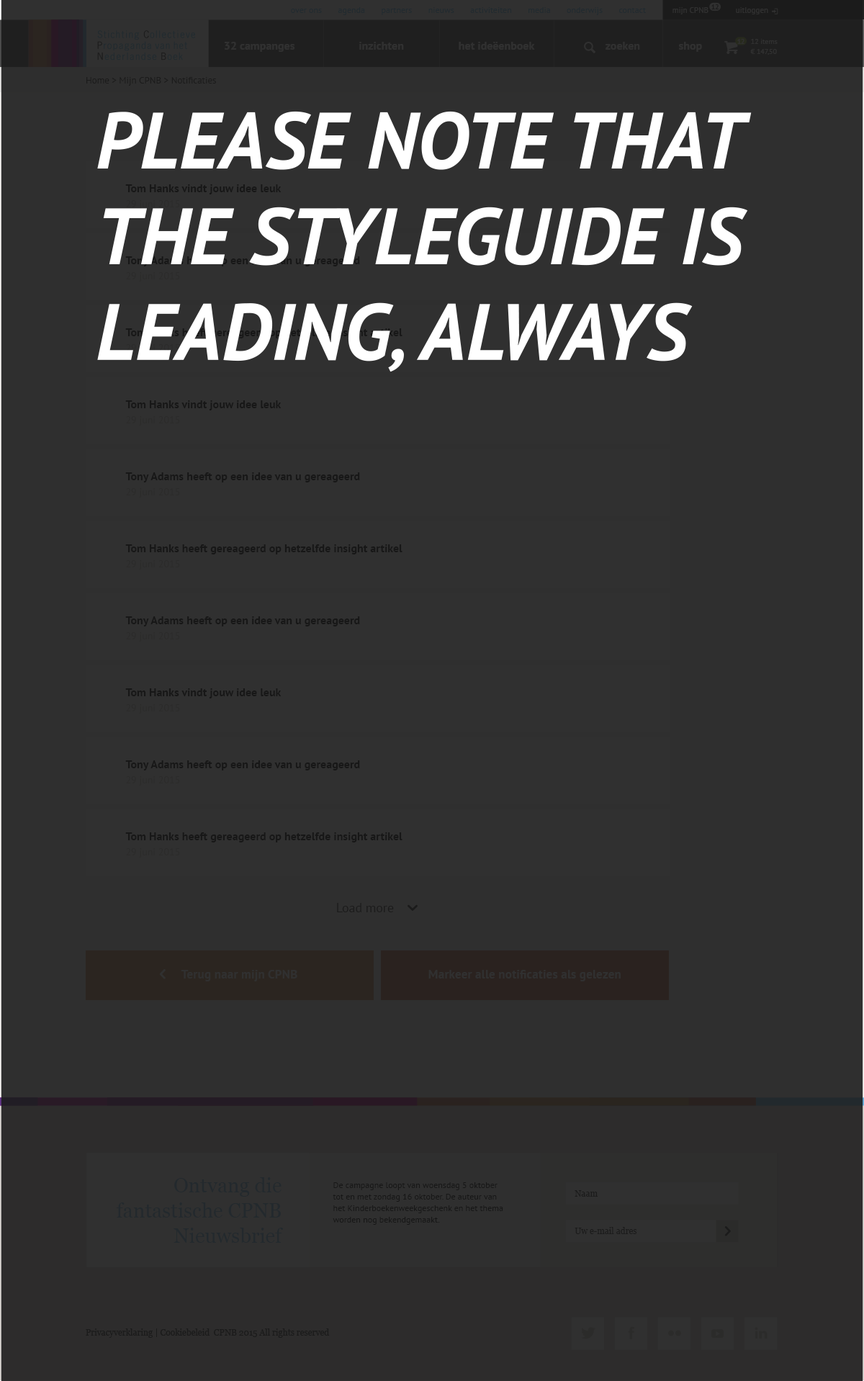
<style>
.page{position:relative;width:864px;height:1381px;background:#303030}
.page>*{position:absolute;margin:0}
.t1{font:7.2px "PTSans-Bold";letter-spacing:-0.05em;color:#222221}
.t2{font:8.6px "PTSans-Regular";color:#212a2f}
.t3{font:8px "PTSans-Regular";color:#303030}
.t4{font:11.5px "PTSans-Bold";color:#303030}
.t5{font:7.2px "PTSans-Bold";letter-spacing:-0.05em;color:#303030}
.t6{font:7.2px/10.1px "PTSans-Regular";color:#303030}
.t7{font:9.4px "PTSans-Regular";color:#222221}
.t8{font:11.5px/15.1px "PTSans-Bold";color:#000000}
.t9{font:10.1px/15.1px "PTSans-Regular";color:#cac5c1}
.t10{font:12.9px "PTSans-Regular";color:#222222}
.t11{font:12.6px "PTSans-Bold";color:#303030}
.t12{font:20.2px/25.2px "Georgia";color:#23292d}
.t13{font:8.6px/11.5px "PTSans-Regular";color:#000000}
.t14{font:8.6px "Georgia";color:#222221}
</style>
<div class="page">
<p class="t1" style="left:711px;top:4px;width:7px;height:5px">12</p>
<p class="t2" style="left:291px;top:7px;width:355px;height:8px">over ons       agenda       partners       nieuws       activiteiten       media       onderwijs       contact</p>
<p class="t3" style="left:672px;top:7px;width:36px;height:7px">mijn CPNB</p>
<p class="t3" style="left:736px;top:7px;width:32px;height:7px">uitloggen</p>
<p class="t4" style="left:225px;top:42px;width:70px;height:10px">32 campanges</p>
<p class="t4" style="left:359px;top:42px;width:45px;height:8px">inzichten</p>
<p class="t4" style="left:459px;top:42px;width:76px;height:8px">het ideëenboek</p>
<p class="t4" style="left:605px;top:42px;width:35px;height:8px">zoeken</p>
<p class="t4" style="left:678px;top:42px;width:24px;height:10px">shop</p>
<p class="t5" style="left:737px;top:39px;width:7px;height:5px">12</p>
<p class="t6" style="left:750px;top:39px;width:27px;height:16px">12 items<br>€ 147,50</p>
<p class="t7" style="left:86px;top:77px;width:130px;height:9px">Home &gt; Mijn CPNB &gt; Notificaties</p>
<p class="t8" style="left:125px;top:400px;width:156px;height:25px">Tom Hanks vindt jouw idee leuk<br><span class="t9">29 juni 2015</span></p>
<p class="t8" style="left:125px;top:472px;width:235px;height:25px">Tony Adams heeft op een idee van u gereageerd<br><span class="t9">29 juni 2015</span></p>
<p class="t8" style="left:125px;top:544px;width:277px;height:25px">Tom Hanks heeft gereageerd op hetzelfde insight artikel<br><span class="t9">29 juni 2015</span></p>
<p class="t8" style="left:125px;top:616px;width:235px;height:25px">Tony Adams heeft op een idee van u gereageerd<br><span class="t9">29 juni 2015</span></p>
<p class="t8" style="left:125px;top:688px;width:156px;height:25px">Tom Hanks vindt jouw idee leuk<br><span class="t9">29 juni 2015</span></p>
<p class="t8" style="left:125px;top:760px;width:235px;height:25px">Tony Adams heeft op een idee van u gereageerd<br><span class="t9">29 juni 2015</span></p>
<p class="t8" style="left:125px;top:832px;width:277px;height:25px">Tom Hanks heeft gereageerd op hetzelfde insight artikel<br><span class="t9">29 juni 2015</span></p>
<p class="t10" style="left:337px;top:903px;width:57px;height:9px">Load more</p>
<p class="t11" style="left:181px;top:970px;width:116px;height:11px">Terug naar mijn CPNB</p>
<p class="t11" style="left:428px;top:970px;width:192px;height:11px">Markeer alle notificaties als gelezen</p>
<p class="t12" style="left:116px;top:1177px;width:167px;height:65px;text-align:right">Ontvang die<br>fantastische CPNB<br>Nieuwsbrief</p>
<p class="t13" style="left:333px;top:1182px;width:170px;height:42px">De campagne loopt van woensdag 5 oktober tot en met zondag 16 oktober. De auteur van het Kinderboekenweekgeschenk en het thema worden nog bekendgemaakt.</p>
<p class="t14" style="left:574px;top:1190px;width:23px;height:6px">Naam</p>
<p class="t14" style="left:574px;top:1227px;width:63px;height:7px">Uw e-mail adres</p>
<p class="t14" style="left:86px;top:1328px;width:244px;height:9px">Privacyverklaring | Cookiebeleid  CPNB 2015 All rights reserved</p>
</div>
